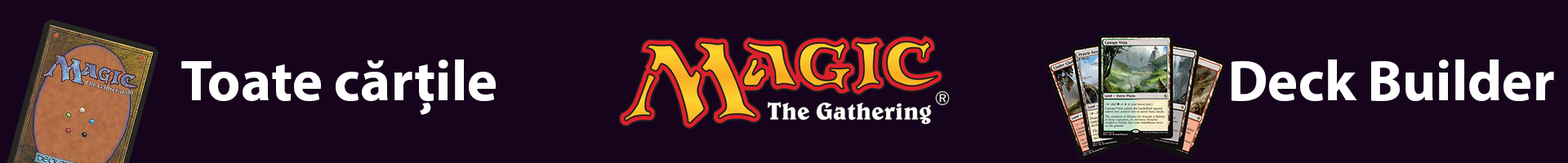
<style>
.page{position:relative;width:1568px;height:163px;background:#16041c}
.page>*{position:absolute;margin:0}
.t1{font:57.8px "MyriadPro-Bold";color:#ffffff}
</style>
<div class="page">
<p class="t1" style="left:181px;top:60px;width:315px;height:55px">Toate cărțile</p>
<p class="t1" style="left:1232px;top:60px;width:322px;height:41px">Deck Builder</p>
</div>
